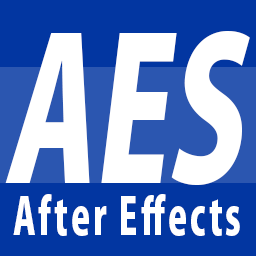
<style>
.page{position:relative;width:256px;height:256px;background:#0236a1}
.page>*{position:absolute;margin:0}
.t1{font:194px "KozGoPr6N-Heavy";color:#ffffff;font-style:italic;scale:0.69 1}
.t2{font:50px "KozGoPr6N-Heavy";letter-spacing:0.08em;color:#ffffff;scale:0.69 1}
</style>
<div class="page">
<p class="t1" style="left:5px;top:31px;width:245px;height:154px">AES</p>
<p class="t2" style="left:13px;top:194px;width:227px;height:42px">After Effects</p>
</div>
